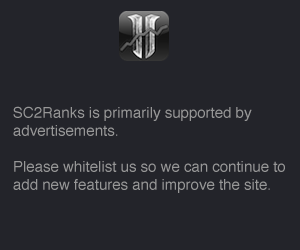
<style>
.page{position:relative;width:300px;height:250px;background:#23242a}
.page>*{position:absolute;margin:0}
.t1{font:15px/18px "Helvetica";color:#979797}
</style>
<div class="page">
<p class="t1" style="left:13px;top:106px;width:272px;height:87px">SC2Ranks is primarily supported by<br>advertisements.<br><br>Please whitelist us so we can continue to add new features and improve the site.</p>
</div>
